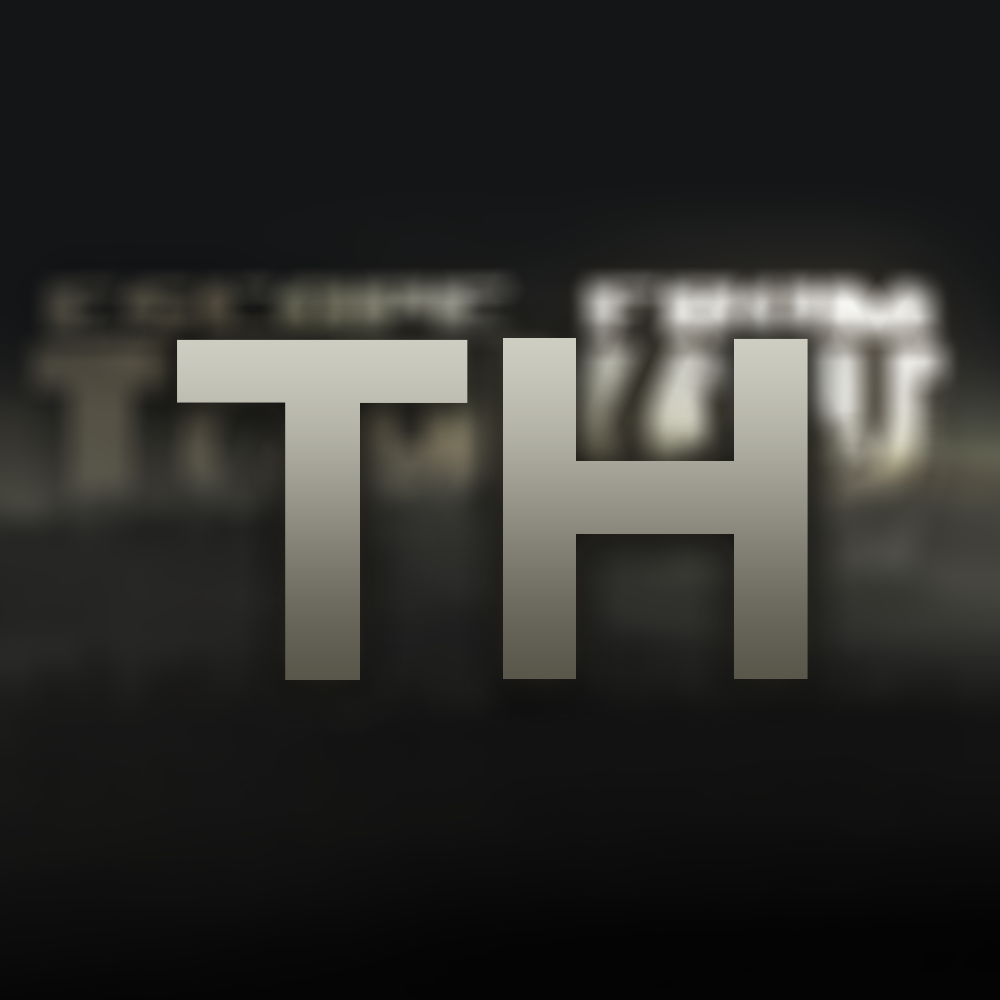
<style>
.page{position:relative;width:1000px;height:1000px;background:#141517}
.page>*{position:absolute;margin:0}
.t1{font:476.5px "Couture-Bold"}
</style>
<div class="page">
<p class="t1" style="left:177px;top:338px;width:631px;height:342px">th</p>
</div>
